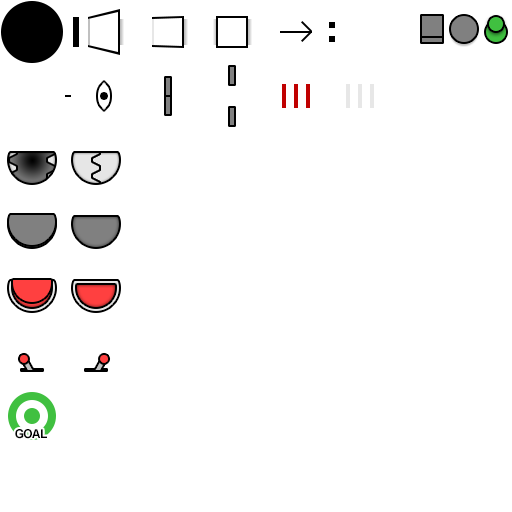
<style>
.page{position:relative;width:512px;height:512px;background:#ffffff}
.page>*{position:absolute;margin:0}
.t1{font:12px "Arial-BoldMT";letter-spacing:-0.06em;color:#000000}
</style>
<div class="page">
<p class="t1" style="left:15px;top:429px;width:32px;height:10px">GOAL</p>
</div>
